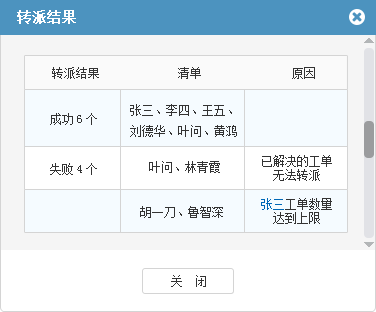
<style>
.page{position:relative;width:376px;height:312px;background:#ffffff}
.page>*{position:absolute;margin:0}
.t1{font:14px "SimSun";color:#ffffff;font-weight:bold}
.t2{font:12px "SimSun";color:#333333}
.t3{font:12px/14px "SimSun";color:#333333}
.t4{font:12px/14px "SimSun";color:#0068b7}
</style>
<div class="page">
<p class="t1" style="left:17px;top:10px;width:59px;height:14px">转派结果</p>
<p class="t2" style="left:52px;top:67px;width:263px;height:12px">转派结果             清单               原因</p>
<p class="t2" style="left:50px;top:113px;width:47px;height:12px">成功6个</p>
<p class="t2" style="left:130px;top:104px;width:107px;height:33px">张三、李四、王五、<br>刘德华、叶问、黄鸿</p>
<p class="t2" style="left:149px;top:161px;width:71px;height:12px">叶问、林青霞</p>
<p class="t3" style="left:262px;top:155px;width:70px;height:26px;text-align:center">已解决的工单<br>无法转派</p>
<p class="t2" style="left:50px;top:163px;width:47px;height:12px">失败4个</p>
<p class="t3" style="left:261px;top:198px;width:71px;height:26px;text-align:center"><span class="t4">张三</span>工单数量<br>达到上限</p>
<p class="t2" style="left:140px;top:206px;width:83px;height:12px">胡一刀、鲁智深</p>
<p class="t2" style="left:171px;top:275px;width:35px;height:12px">关　闭</p>
</div>
